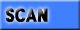
<style>
.page{position:relative;width:80px;height:30px;background:#4080ff}
.page>*{position:absolute;margin:0}
.t1{font:18px "GothicXB-HM"}
</style>
<div class="page">
<p class="t1" style="left:5px;top:8px;width:43px;height:14px">SCAN</p>
</div>
